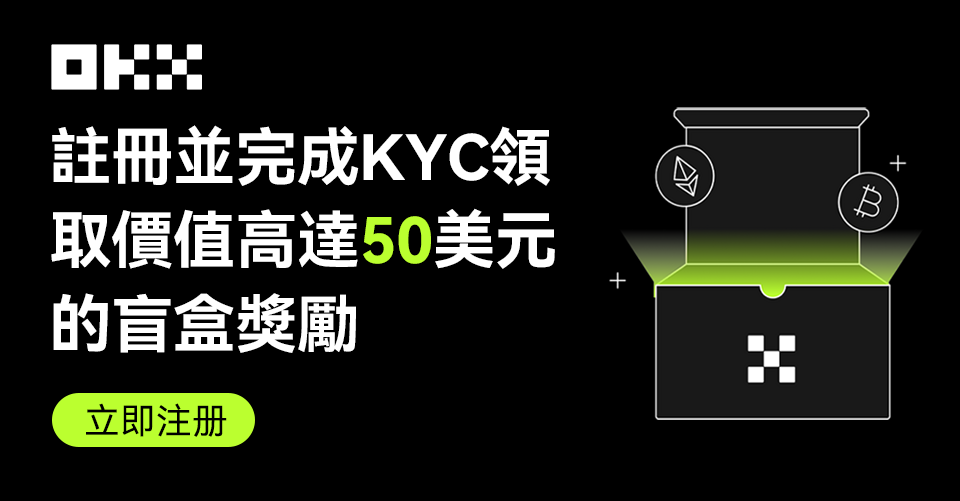
<style>
.page{position:relative;width:960px;height:501px;background:#000000}
.page>*{position:absolute;margin:0}
.t1{font:62.6px/83.5px "HarmonyOS_Sans_SC_Bold";letter-spacing:-0.01em;color:#ffffff}
.t2{font:62.6px/83.5px "HarmonyOS_Sans_SC_Bold";letter-spacing:-0.01em;color:#bcff2f}
.t3{font:35.8px "HarmonyOS_Sans_SC";color:#000000}
</style>
<div class="page">
<p class="t1" style="left:51px;top:125px;width:504px;height:228px">註冊並完成KYC領<br>取價值高達<span class="t2">50</span>美元<br>的盲盒獎勵</p>
<p class="t3" style="left:86px;top:403px;width:141px;height:34px">立即注册</p>
</div>
